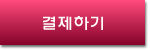
<style>
.page{position:relative;width:150px;height:50px}
.page>*{position:absolute;margin:0}
.t1{font:16px "HYwulM";color:#fefefe}
</style>
<div class="page">
<p class="t1" style="left:43px;top:16px;width:60px;height:14px">결제하기</p>
</div>
